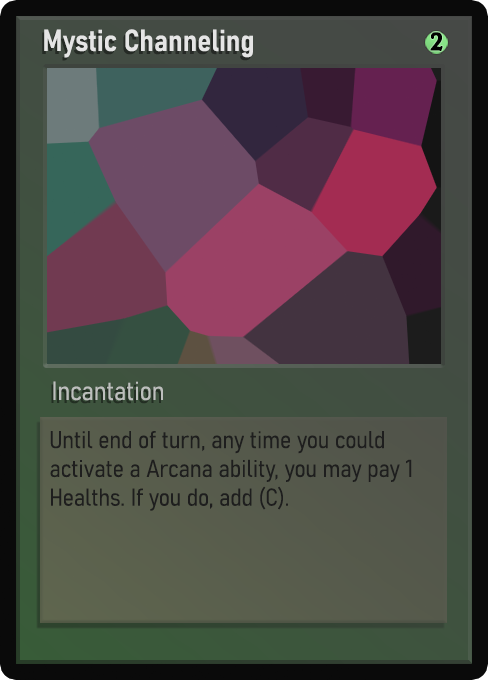
<style>
.page{position:relative;width:488px;height:680px}
.page>*{position:absolute;margin:0}
.t1{font:30px "Bahnschrift-SemiBoldSemiCondensed";color:#f2f2f2;font-weight:bold}
.t2{font:25px "WTRRoycroft";color:#000000;font-weight:bold;scale:1.09 1}
.t3{font:26px "Bahnschrift-LightSemiCondensed";color:#c8c8c8;font-weight:bold}
.t4{font:24px "Bahnschrift-LightSemiCondensed";color:#1e1e1e;font-weight:bold}
</style>
<div class="page">
<p class="t1" style="left:44px;top:29px;width:209px;height:29px;opacity:0.9">Mystic Channeling</p>
<p class="t2" style="left:430px;top:32px;width:13px;height:19px">2</p>
<p class="t3" style="left:53px;top:381px;width:110px;height:20px;opacity:0.9">Incantation</p>
<p class="t4" style="left:50px;top:431px;width:362px;height:80px">Until end of turn, any time you could activate a Arcana ability, you may pay 1 Healths. If you do, add (C).</p>
</div>
